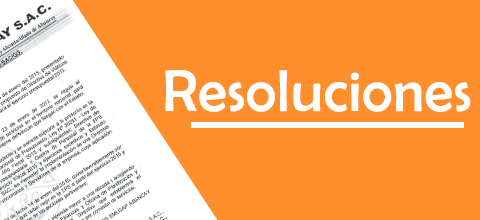
<style>
.page{position:relative;width:480px;height:220px;background:#fe8f2c}
.page>*{position:absolute;margin:0}
.t1{font:59.4px "BerlinSansFB-Reg";letter-spacing:0.015em;color:#fefefe}
</style>
<div class="page">
<p class="t1" style="left:165px;top:70px;width:306px;height:42px">Resoluciones</p>
</div>
